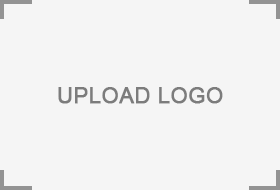
<style>
.page{position:relative;width:280px;height:190px;background:#f5f5f5}
.page>*{position:absolute;margin:0}
.t1{font:22px "ArialMT";color:#7c7c7c;font-weight:bold}
</style>
<div class="page">
<p class="t1" style="left:58px;top:87px;width:165px;height:17px">UPLOAD LOGO</p>
</div>
